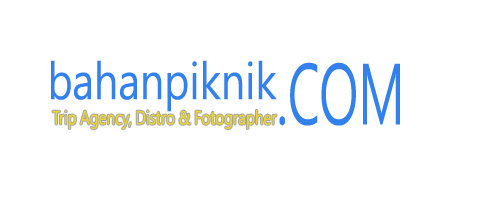
<style>
.page{position:relative;width:500px;height:200px;background:#ffffff}
.page>*{position:absolute;margin:0}
.t1{font:48px "MicrosoftJhengHeiUIRegular";color:#3382ed;scale:0.83 1}
.t2{font:80px "MicrosoftJhengHeiUIRegular";color:#3382ed;scale:0.6 1}
.t3{font:17.9px "MicrosoftJhengHeiUIRegular";color:#edd533;scale:0.78 1}
</style>
<div class="page">
<p class="t1" style="left:51px;top:60px;width:226px;height:52px">bahanpiknik</p>
<p class="t2" style="left:279px;top:62px;width:121px;height:64px">.COM</p>
<p class="t3" style="left:52px;top:110px;width:225px;height:20px">Trip Agency, Distro &amp; Fotographer</p>
</div>
